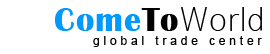
<style>
.page{position:relative;width:270px;height:54px;background:#ffffff}
.page>*{position:absolute;margin:0}
.t1{font:34.5px "DistrictThin";letter-spacing:0.02em;color:#000000}
.t2{font:34.5px "BritannicBold";letter-spacing:0.02em;color:#0099ff}
.t3{font:34.5px "BritannicBold";letter-spacing:0.02em;color:#000000}
.t4{font:12px "ArialMT";letter-spacing:0.32em;color:#000000}
</style>
<div class="page">
<p class="t1" style="left:55px;top:7px;width:207px;height:24px"><span class="t2">Come</span><span class="t3">To</span>World</p>
<p class="t4" style="left:93px;top:36px;width:169px;height:11px">global trade center</p>
</div>
